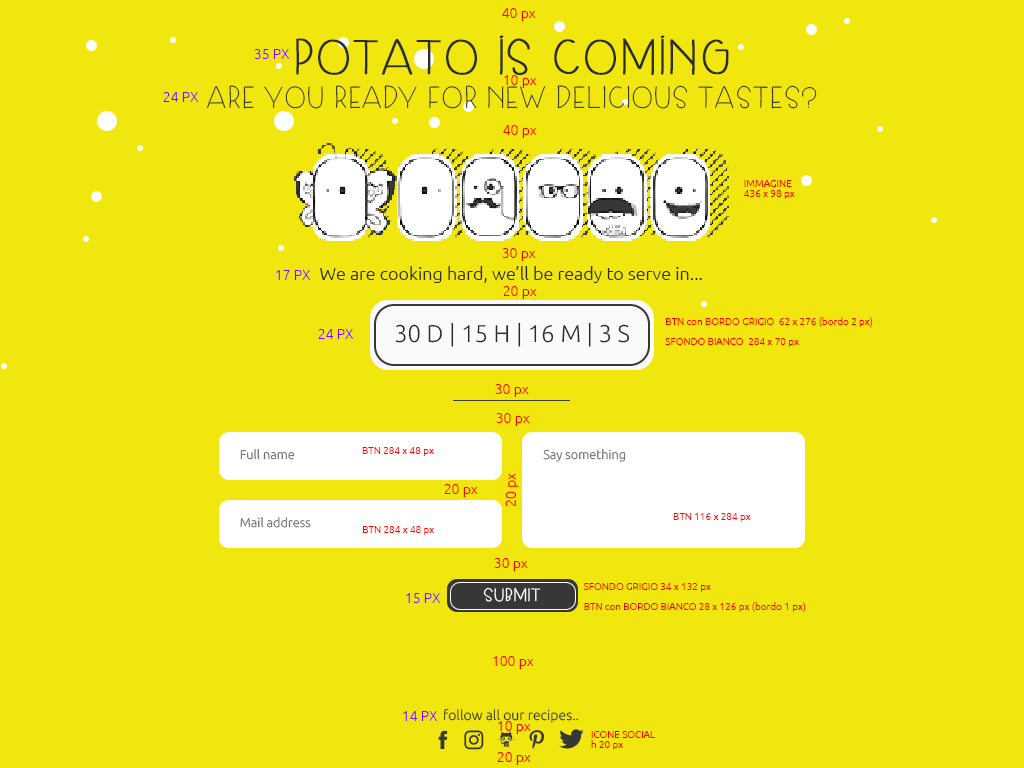
<style>
.page{position:relative;width:1024px;height:768px;background:#f1e60d}
.page>*{position:absolute;margin:0}
.t1{font:14px "Ubuntu-Light";color:#ff0000}
.t2{font:48px "SkipLegDay";color:#2c2c2b;font-weight:bold}
.t3{font:14px "Ubuntu-Light";color:#8400ff}
.t4{font:30px "SkipLegDay";color:#2c2c2b}
.t5{font:10px/10px "Ubuntu-Light";color:#ff0000}
.t6{font:10px/30px "Ubuntu-Light";color:#ff0000}
.t7{font:18px "Ubuntu-Light";color:#2c2c2b}
.t8{font:24.1px "Ubuntu-Light";color:#2c2c2b;text-transform:uppercase}
.t9{font:12.7px "Ubuntu-Light";color:#737372}
.t10{font:17.6px "SkipLegDay";color:#ffffff;font-weight:bold}
.t11{font:14px "Ubuntu-Light";color:#2c2c2b}
</style>
<div class="page">
<p class="t1" style="left:502px;top:8px;width:34px;height:13px">40 px</p>
<p class="t2" style="left:296px;top:35px;width:433px;height:40px">potato is coming</p>
<p class="t3" style="left:254px;top:49px;width:35px;height:10px">35 PX</p>
<p class="t1" style="left:504px;top:75px;width:33px;height:13px">10 px</p>
<p class="t4" style="left:207px;top:85px;width:610px;height:24px">ARE YOU READY FOR NEW DELICIOUS TASTES?</p>
<p class="t3" style="left:163px;top:92px;width:35px;height:10px">24 PX</p>
<p class="t1" style="left:503px;top:125px;width:34px;height:13px">40 px</p>
<p class="t5" style="left:744px;top:180px;width:51px;height:19px">IMMAGINE<br>436 x 98 px<br><span class="t6"><br><br>BTN<br>BTN</span></p>
<p class="t1" style="left:502px;top:248px;width:34px;height:13px">30 px</p>
<p class="t3" style="left:276px;top:270px;width:34px;height:10px">17 PX</p>
<p class="t7" style="left:320px;top:266px;width:382px;height:17px">We are cooking hard, we’ll be ready to serve in...</p>
<p class="t1" style="left:503px;top:286px;width:34px;height:13px">20 px</p>
<p class="t5" style="left:665px;top:317px;width:208px;height:30px">BTN con BORDO GRIGIO  62 x 276 (bordo 2 px) <br><br>SFONDO BIANCO  284 x 70 px<br><span class="t6"><br><br>BTN<br>BTN</span></p>
<p class="t3" style="left:318px;top:329px;width:35px;height:10px">24 PX</p>
<p class="t8" style="left:395px;top:322px;width:235px;height:25px">30 d | 15 H | 16 M | 3 s</p>
<p class="t1" style="left:495px;top:384px;width:34px;height:13px">30 px</p>
<p class="t1" style="left:496px;top:413px;width:34px;height:13px">30 px</p>
<p class="t9" style="left:240px;top:449px;width:55px;height:11px">Full name</p>
<p class="t5" style="left:362px;top:447px;width:72px;height:9px">BTN 284 x 48 px<br><span class="t6"><br><br>BTN<br>BTN</span></p>
<p class="t9" style="left:543px;top:449px;width:83px;height:13px">Say something</p>
<p class="t1" style="left:505px;top:473px;width:14px;height:34px;rotate:-90deg">20 px</p>
<p class="t1" style="left:444px;top:484px;width:34px;height:13px">20 px</p>
<p class="t9" style="left:240px;top:517px;width:71px;height:11px">Mail address</p>
<p class="t5" style="left:673px;top:513px;width:78px;height:9px">BTN 116 x 284 px<br><span class="t6"><br><br>BTN<br>BTN</span></p>
<p class="t5" style="left:363px;top:526px;width:72px;height:9px">BTN 284 x 48 px<br><span class="t6"><br><br>BTN<br>BTN</span></p>
<p class="t1" style="left:494px;top:558px;width:34px;height:13px">30 px</p>
<p class="t3" style="left:406px;top:593px;width:34px;height:10px">15 PX</p>
<p class="t10" style="left:483px;top:587px;width:58px;height:15px">SUBMIT</p>
<p class="t5" style="left:584px;top:583px;width:222px;height:29px">SFONDO GRIGIO 34 x 132 px<br><br>BTN con BORDO BIANCO 28 x 126 px (bordo 1 px)<br><span class="t6"><br><br>BTN<br>BTN</span></p>
<p class="t1" style="left:493px;top:656px;width:41px;height:13px">100 px</p>
<p class="t3" style="left:403px;top:711px;width:34px;height:10px">14 PX</p>
<p class="t11" style="left:444px;top:709px;width:135px;height:14px">follow all our recipes..</p>
<p class="t1" style="left:498px;top:721px;width:33px;height:13px">10 px</p>
<p class="t5" style="left:591px;top:731px;width:64px;height:19px">ICONE SOCIAL<br>h 20 px<br><span class="t6"><br><br>BTN<br>BTN</span></p>
<p class="t1" style="left:497px;top:752px;width:34px;height:13px">20 px</p>
</div>
